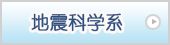
<style>
.page{position:relative;width:170px;height:45px}
.page>*{position:absolute;margin:0}
.t1{font:18px "YouYuan";color:#304e7d;font-weight:bold}
</style>
<div class="page">
<p class="t1" style="left:31px;top:13px;width:92px;height:19px">地震科学系</p>
</div>
